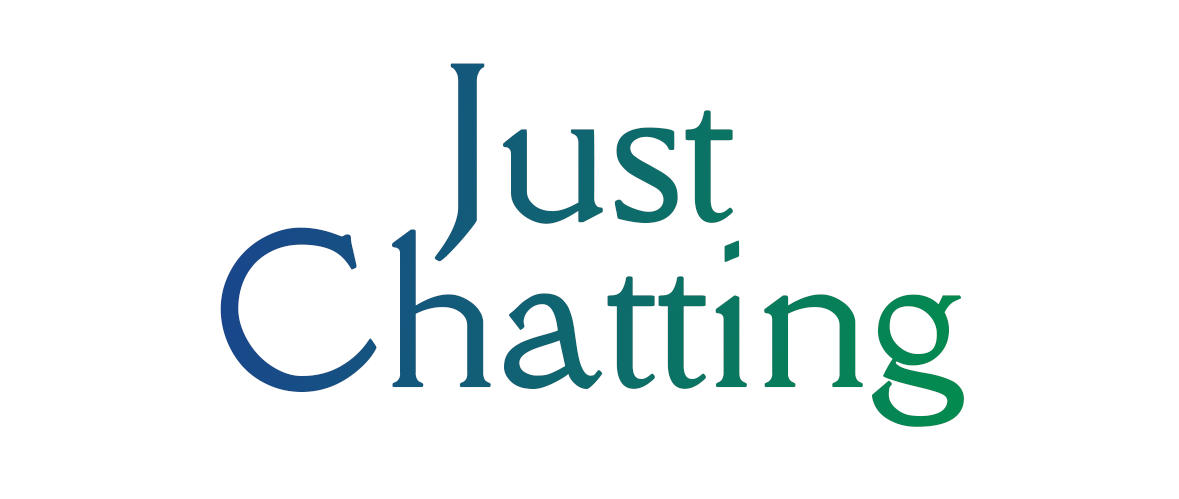
<style>
.page{position:relative;width:1179px;height:499px;background:#ffffff}
.page>*{position:absolute;margin:0}
.t1{font:197px/166px "DellaRespira-Regular"}
</style>
<div class="page">
<p class="t1" style="left:220px;top:63px;width:744px;height:364px;text-align:center">Just <br>Chatting</p>
</div>
